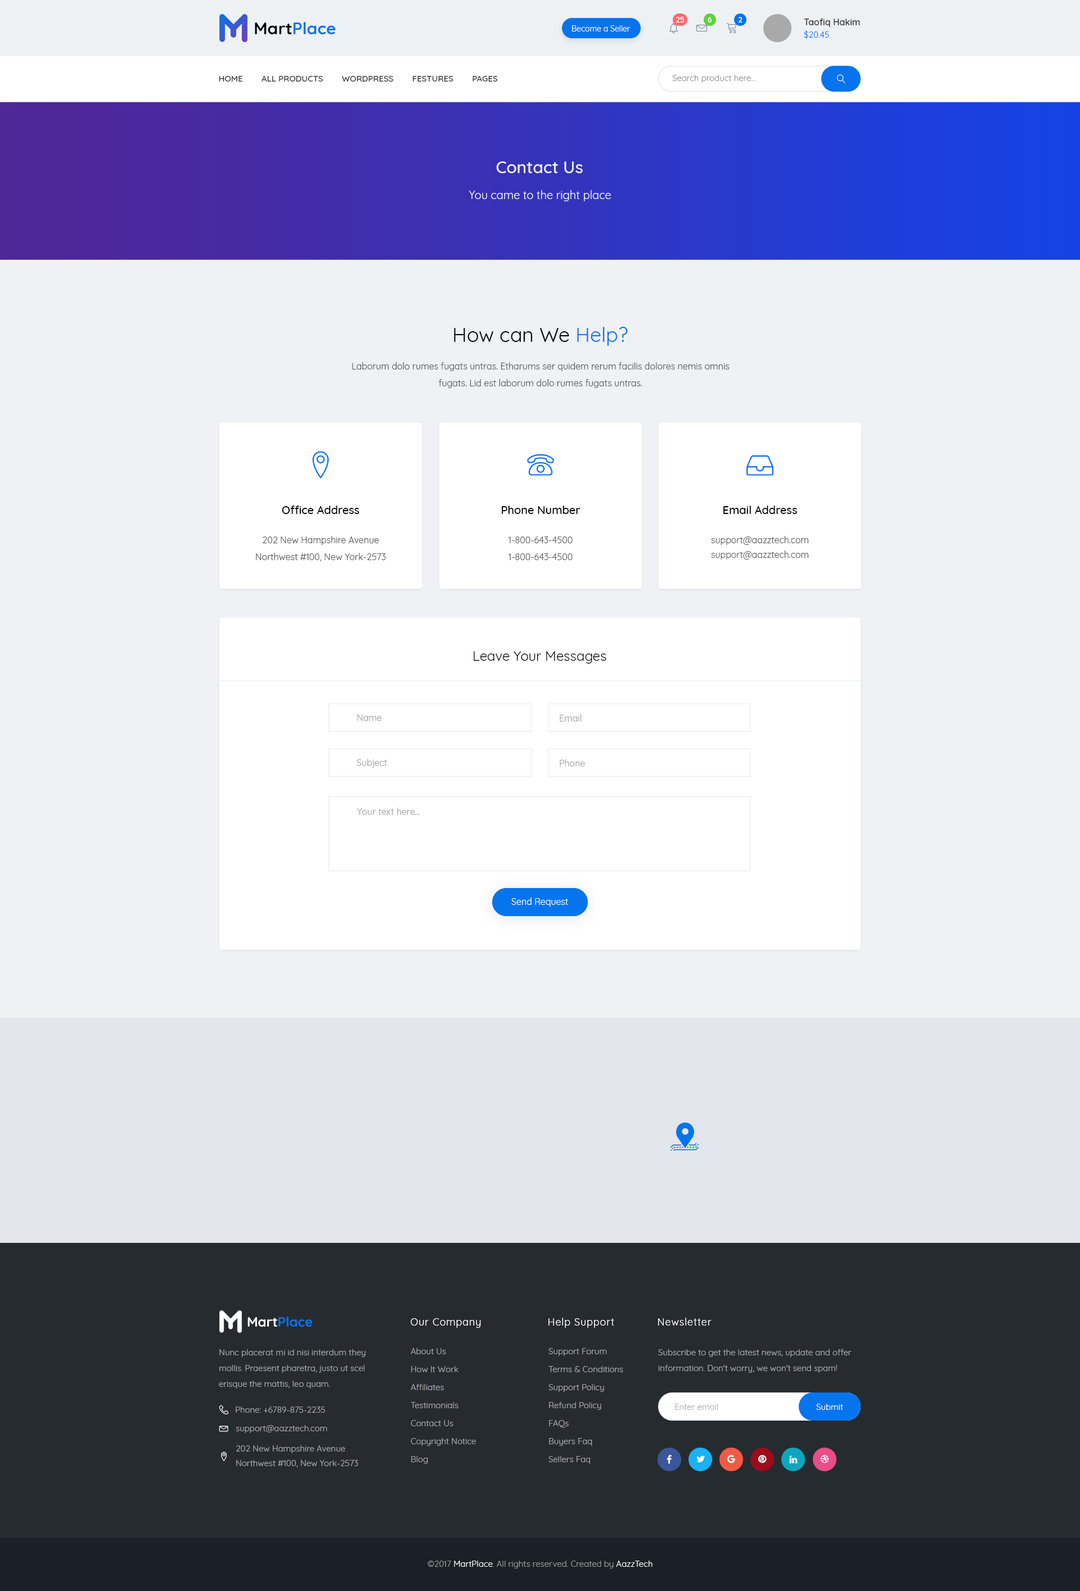
<style>
.page{position:relative;width:1080px;height:1591px;background:#eff1f5}
.page>*{position:absolute;margin:0}
.t1{font:7.9px "Quicksand-Medium";color:#ffffff;text-transform:uppercase}
.t2{font:16.9px "Quicksand-Bold";color:#0674ec}
.t3{font:16.9px "Quicksand-Bold";color:#000000}
.t4{font:7.9px "Quicksand-Regular";color:#ffffff}
.t5{font:9px/12.4px "Quicksand-Medium";color:#333333}
.t6{font:8.4px/12.4px "Quicksand-Regular";color:#0674ec}
.t7{font:8.4px "Quicksand-Medium";color:#333333;text-transform:uppercase}
.t8{font:8.4px "Quicksand-Regular";color:#898f96}
.t9{font:16.9px "Quicksand-Medium";color:#f3f3f8}
.t10{font:11.2px "Quicksand-Regular";color:#f3f3f8}
.t11{font:20.2px "Quicksand-Regular";color:#000000}
.t12{font:20.2px "Quicksand-Regular";color:#0674ec}
.t13{font:9px/16.9px "Quicksand-Regular";color:#555555}
.t14{font:11.2px "Quicksand-Medium";color:#000000}
.t15{font:9px/14.6px "Quicksand-Regular";color:#555555}
.t16{font:13.5px "Quicksand-Regular";color:#000000}
.t17{font:9px "Quicksand-Regular";color:#9e9e9e}
.t18{font:9px "Quicksand-Regular";color:#ffffff}
.t19{font:13.5px "Quicksand-Bold";color:#0674ec}
.t20{font:13.5px "Quicksand-Bold";color:#ffffff}
.t21{font:10.1px "Quicksand-Regular";letter-spacing:0.05em;color:#ffffff}
.t22{font:8.4px/15.8px "Quicksand-Regular";color:#ababab}
.t23{font:8.4px/18px "Quicksand-Regular";color:#ababab}
.t24{font:8.4px "Quicksand-Regular";color:#ababab}
.t25{font:8.4px "Quicksand-Regular";color:#ffffff}
.t26{font:8.4px/14.6px "Quicksand-Regular";color:#ababab}
.t27{font:8.4px "Quicksand-Regular";color:#999999}
</style>
<div class="page">
<p class="t1" style="left:676px;top:17px;width:8px;height:5px">25</p>
<p class="t1" style="left:708px;top:17px;width:4px;height:5px">6</p>
<p class="t1" style="left:738px;top:17px;width:4px;height:5px">2</p>
<p class="t2" style="left:255px;top:22px;width:81px;height:12px"><span class="t3">Mart</span>Place</p>
<p class="t4" style="left:572px;top:25px;width:59px;height:7px">Become a Seller</p>
<p class="t5" style="left:804px;top:19px;width:56px;height:20px">Taofiq Hakim<br><span class="t6">$20.45</span></p>
<p class="t7" style="left:219px;top:76px;width:279px;height:6px">HOME        all products        wordpress        festures        Pages</p>
<p class="t8" style="left:672px;top:75px;width:83px;height:8px">Search product here...</p>
<p class="t9" style="left:496px;top:161px;width:87px;height:12px">Contact Us</p>
<p class="t10" style="left:469px;top:190px;width:142px;height:11px">You came to the right place</p>
<p class="t11" style="left:454px;top:327px;width:174px;height:19px">How can We <span class="t12">Help?</span></p>
<p class="t13" style="left:352px;top:362px;width:378px;height:26px;text-align:center">Laborum dolo rumes fugats untras. Etharums ser quidem rerum facilis dolores nemis omnis fugats. Lid est laborum dolo rumes fugats untras.</p>
<p class="t14" style="left:282px;top:506px;width:77px;height:8px">Office Address</p>
<p class="t14" style="left:502px;top:506px;width:78px;height:8px">Phone Number</p>
<p class="t14" style="left:723px;top:506px;width:74px;height:8px">Email Address</p>
<p class="t13" style="left:256px;top:536px;width:130px;height:25px;text-align:center">202 New Hampshire Avenue<br>Northwest #100, New York-2573</p>
<p class="t13" style="left:508px;top:537px;width:65px;height:23px;text-align:center">1-800-643-4500<br>1-800-643-4500</p>
<p class="t15" style="left:711px;top:536px;width:97px;height:24px;text-align:center">support@aazztech.com<br>support@aazztech.com</p>
<p class="t16" style="left:474px;top:651px;width:132px;height:13px">Leave Your Messages</p>
<p class="t17" style="left:357px;top:714px;width:24px;height:7px">Name</p>
<p class="t17" style="left:560px;top:714px;width:22px;height:8px">Email</p>
<p class="t17" style="left:357px;top:759px;width:30px;height:9px">Subject</p>
<p class="t17" style="left:560px;top:759px;width:25px;height:8px">Phone</p>
<p class="t17" style="left:357px;top:808px;width:63px;height:7px">Your text here...</p>
<p class="t18" style="left:511px;top:898px;width:57px;height:9px">Send Request</p>
<p class="t19" style="left:248px;top:1317px;width:65px;height:10px"><span class="t20">Mart</span>Place</p>
<p class="t21" style="left:411px;top:1318px;width:70px;height:10px">Our Company</p>
<p class="t21" style="left:548px;top:1318px;width:66px;height:10px">Help Support</p>
<p class="t21" style="left:658px;top:1318px;width:54px;height:8px">Newsletter</p>
<p class="t22" style="left:219px;top:1349px;width:147px;height:40px">Nunc placerat mi id nisi interdum they mollis. Praesent pharetra, justo ut scel erisque the mattis, leo quam.</p>
<p class="t23" style="left:411px;top:1348px;width:65px;height:116px">About Us<br>How It Work<br>Affiliates<br>Testimonials<br>Contact Us<br>Copyright Notice<br>Blog</p>
<p class="t23" style="left:548px;top:1348px;width:75px;height:116px">Support Forum<br>Terms &amp; Conditions<br>Support Policy<br>Refund Policy<br>FAQs<br>Buyers Faq<br>Sellers Faq</p>
<p class="t22" style="left:658px;top:1349px;width:194px;height:24px">Subscribe to get the latest news, update and offer information. Don't worry, we won't send spam!</p>
<p class="t24" style="left:236px;top:1407px;width:89px;height:6px">Phone: +6789-875-2235</p>
<p class="t24" style="left:675px;top:1404px;width:43px;height:6px">Enter email</p>
<p class="t25" style="left:816px;top:1404px;width:27px;height:6px">Submit</p>
<p class="t24" style="left:236px;top:1425px;width:91px;height:8px">support@aazztech.com</p>
<p class="t26" style="left:236px;top:1446px;width:122px;height:22px">202 New Hampshire Avenue<br>Northwest #100, New York-2573</p>
<p class="t27" style="left:428px;top:1561px;width:224px;height:8px">©2017 <span class="t25">MartPlace</span>. All rights reserved. Created by <span class="t25">AazzTech</span></p>
</div>
